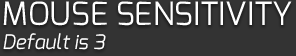
<style>
.page{position:relative;width:296px;height:56px;background:#333333}
.page>*{position:absolute;margin:0}
.t1{font:32px "Exo-Regular";color:#ffffff;text-transform:uppercase}
.t2{font:20px "Exo-Italic";color:#ffffff}
</style>
<div class="page">
<p class="t1" style="left:3px;top:1px;width:289px;height:49px">Mouse Sensitivity<br><span class="t2">Default is 3</span></p>
</div>
